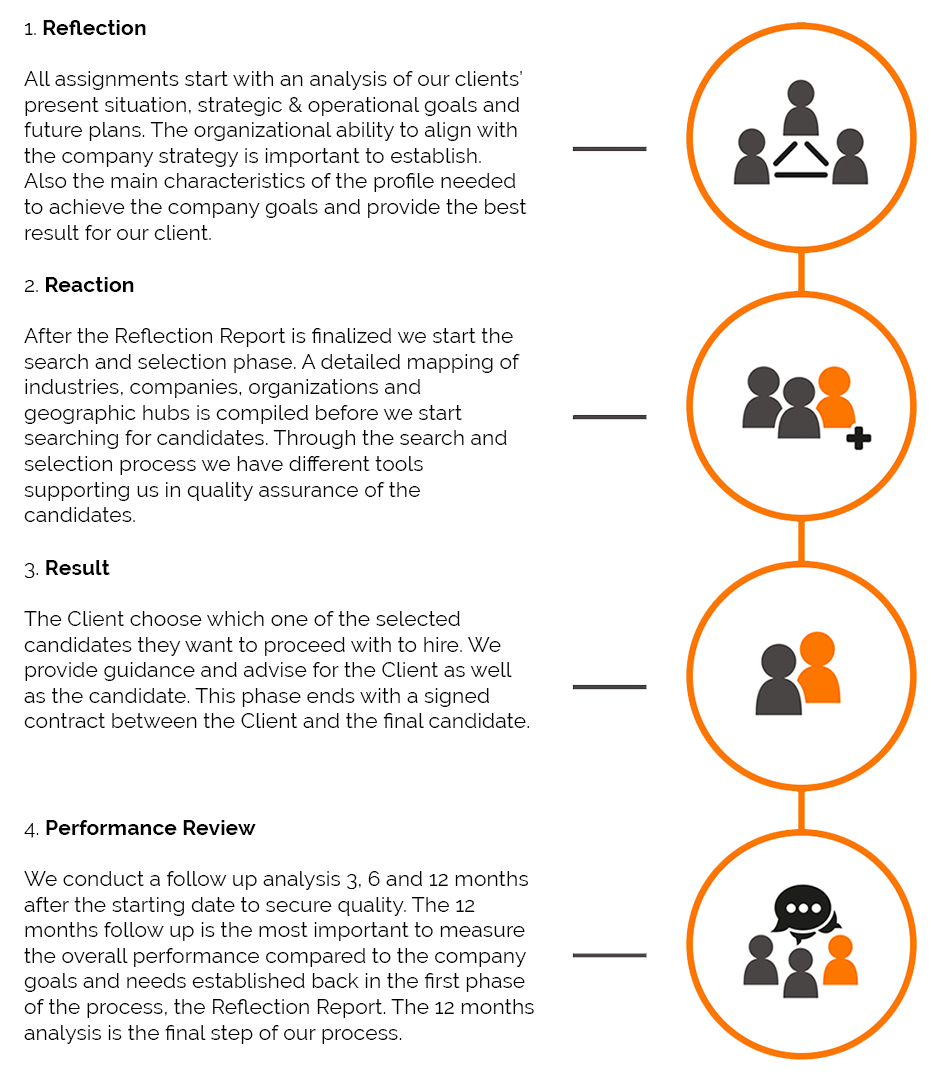
<style>
.page{position:relative;width:950px;height:1080px;background:#ffffff}
.page>*{position:absolute;margin:0}
.t1{font:21.3px "Raleway-Regular";color:#000000}
.t2{font:21.3px "Raleway-Bold";color:#000000}
</style>
<div class="page">
<p class="t1" style="left:24px;top:20px;width:503px;height:220px">1.<span class="t2"> Reflection<br></span><br>All assignments start with an analysis of our clients’ <br>present situation, strategic &amp; operational goals and <br>future plans. The organizational ability to align with <br>the company strategy is important to establish. <br>Also the main characteristics of the profile needed <br>to achieve the company goals and provide the best <br>result for our client.</p>
<p class="t1" style="left:24px;top:277px;width:496px;height:245px">2. <span class="t2">Reaction<br></span><br>After the Reflection Report is finalized we start the <br>search and selection phase. A detailed mapping of <br>industries, companies, organizations and <br>geographic hubs is compiled before we start <br>searching for candidates. Through the search and <br>selection process we have different tools <br>supporting us in quality assurance of the <br>candidates.</p>
<p class="t1" style="left:24px;top:560px;width:505px;height:168px">3. <span class="t2">Result<br></span><br>The Client choose which one of the selected <br>candidates they want to proceed with to hire. We <br>provide guidance and advise for the Client as well <br>as the candidate. This phase ends with a signed <br>contract between the Client and the final candidate.</p>
<p class="t1" style="left:24px;top:820px;width:510px;height:224px">4. <span class="t2">Performance Review<br></span><br>We conduct a follow up analysis 3, 6 and 12 months <br>after the starting date to secure quality. The 12 <br>months follow up is the most important to measure <br>the overall performance compared to the company <br>goals and needs established back in the first phase <br>of the process, the Reflection Report. The 12 months <br>analysis is the final step of our process.</p>
</div>
